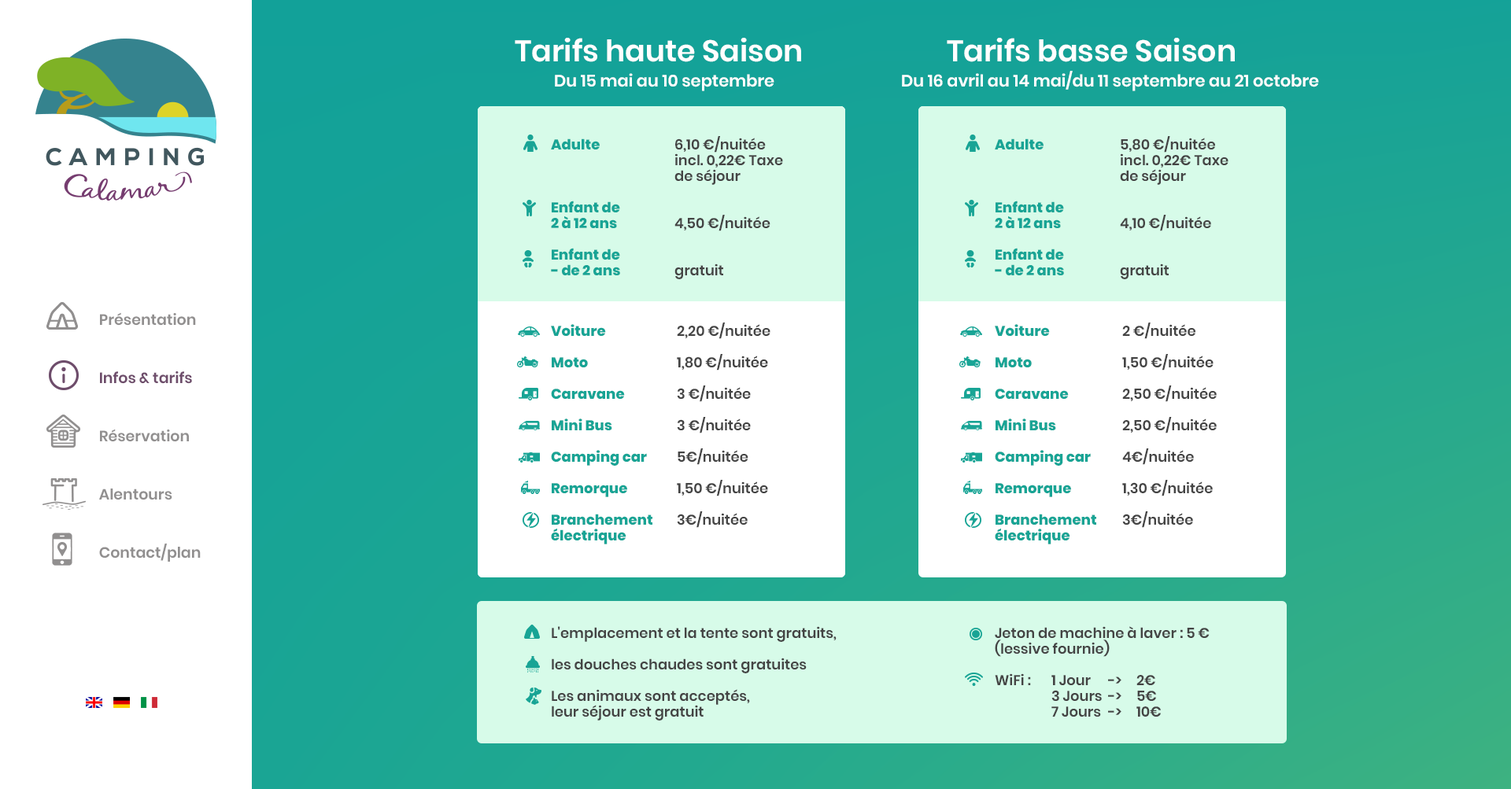
<style>
.page{position:relative;width:1511px;height:789px;background:#ffffff}
.page>*{position:absolute;margin:0}
.t1{font:29.9px "Poppins-SemiBold";color:#ffffff}
.t2{font:16.5px "Poppins-SemiBold";color:#ffffff}
.t3{font:14.2px/15.7px "Poppins-SemiBold";color:#444444}
.t4{font:14.2px/15.7px "Poppins-ExtraBold";color:#18a495}
.t5{font:15px "Poppins-SemiBold";color:#918f8f}
.t6{font:15px "Poppins-SemiBold";color:#6e4d6b}
</style>
<div class="page">
<p class="t1" style="left:515px;top:38px;width:286px;height:24px">Tarifs haute Saison</p>
<p class="t1" style="left:947px;top:38px;width:288px;height:24px">Tarifs basse Saison</p>
<p class="t2" style="left:555px;top:73px;width:219px;height:18px">Du 15 mai au 10 septembre</p>
<p class="t2" style="left:902px;top:71px;width:417px;height:20px">Du 16 avril au 14 mai/du 11 septembre au 21 octobre</p>
<p class="t3" style="left:674px;top:136px;width:109px;height:143px">6,10 €/nuitée<br>incl. 0,22€ Taxe<br>de séjour<br><br><br>4,50 €/nuitée<br><br><br>gratuit</p>
<p class="t3" style="left:1120px;top:136px;width:108px;height:143px">5,80 €/nuitée<br>incl. 0,22€ Taxe<br>de séjour<br><br><br>4,10 €/nuitée<br><br><br>gratuit</p>
<p class="t4" style="left:551px;top:138px;width:69px;height:137px">Adulte  <br><br><br><br>Enfant de <br>2 à 12 ans <br><br>Enfant de <br>- de 2 ans</p>
<p class="t4" style="left:995px;top:138px;width:69px;height:137px">Adulte <br><br><br><br>Enfant de <br>2 à 12 ans <br><br>Enfant de <br>- de 2 ans</p>
<p class="t5" style="left:100px;top:312px;width:96px;height:14px">Présentation</p>
<p class="t4" style="left:551px;top:324px;width:101px;height:221px">Voiture  <br><br>Moto<br><br>Caravane <br><br>Mini Bus <br><br>Camping car <br><br>Remorque <br><br>Branchement <br>électrique</p>
<p class="t3" style="left:677px;top:323px;width:93px;height:205px">2,20 €/nuitée<br><br>1,80 €/nuitée<br><br>3 €/nuitée<br><br>3 €/nuitée<br><br>5€/nuitée<br><br>1,50 €/nuitée<br><br>3€/nuitée</p>
<p class="t4" style="left:995px;top:324px;width:101px;height:221px">Voiture <br><br>Moto<br><br>Caravane  <br><br>Mini Bus<br><br>Camping car <br><br>Remorque<br><br>Branchement <br>électrique</p>
<p class="t3" style="left:1122px;top:323px;width:95px;height:205px">2 €/nuitée<br><br>1,50 €/nuitée<br><br>2,50 €/nuitée<br><br>2,50 €/nuitée<br><br>4€/nuitée<br><br>1,30 €/nuitée<br><br>3€/nuitée</p>
<p class="t6" style="left:100px;top:371px;width:92px;height:13px">Infos &amp; tarifs</p>
<p class="t5" style="left:100px;top:429px;width:89px;height:13px">Réservation</p>
<p class="t5" style="left:99px;top:489px;width:73px;height:11px">Alentours</p>
<p class="t5" style="left:99px;top:544px;width:102px;height:18px">Contact/plan</p>
<p class="t3" style="left:552px;top:626px;width:284px;height:95px">L'emplacement et la tente sont gratuits, <br><br>les douches chaudes sont gratuites<br><br>Les animaux sont acceptés, <br>leur séjour est gratuit</p>
<p class="t3" style="left:995px;top:626px;width:214px;height:91px">Jeton de machine à laver : 5 €<br>(lessive fournie)<br><br>WiFi :  1 Jour  -&gt;  2€<br>  3 Jours  -&gt;  5€<br>  7 Jours  -&gt;  10€</p>
</div>
